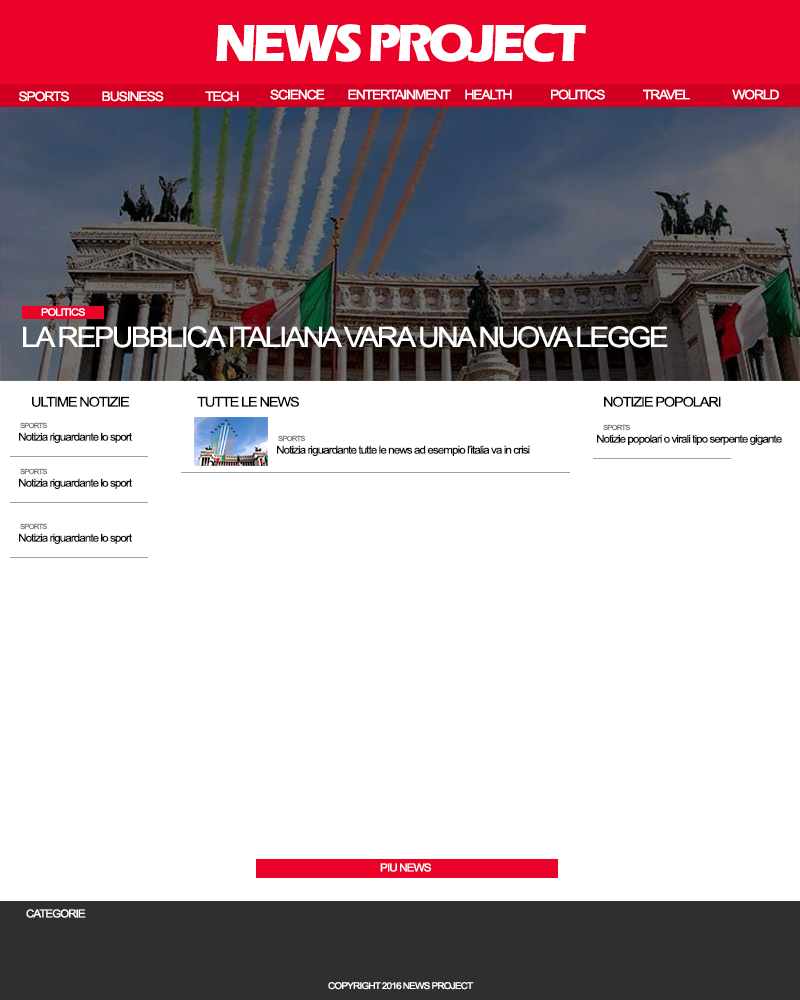
<style>
.page{position:relative;width:800px;height:1000px;background:#ffffff}
.page>*{position:absolute;margin:0}
.t1{font:53.7px "ErasITC-Bold";letter-spacing:-0.08em;color:#ffffff;scale:0.96 1}
.t2{font:13px "ArialMT";letter-spacing:-0.08em;color:#ffffff;scale:1.07 1}
.t3{font:10.1px "ArialMT";letter-spacing:-0.08em;color:#ffffff;scale:1.1 1}
.t4{font:28.2px "ArialMT";letter-spacing:-0.08em;color:#ffffff;scale:1.06 1}
.t5{font:13.5px "ArialMT";letter-spacing:-0.08em;color:#000000;scale:1.08 1}
.t6{font:7.1px "ArialMT";letter-spacing:-0.08em;color:#757575;scale:1.04 1}
.t7{font:11px "ArialMT";letter-spacing:-0.08em;color:#0b0b0b;scale:1.06 1}
.t8{font:11px "ArialMT";letter-spacing:-0.08em;color:#ffffff;scale:1.07 1}
.t9{font:11px "ArialMT";letter-spacing:-0.08em;color:#ffffff;scale:1.05 1}
.t10{font:9.3px "ArialMT";letter-spacing:-0.08em;color:#ffffff;scale:1.07 1}
</style>
<div class="page">
<p class="t1" style="left:216px;top:24px;width:370px;height:38px">NEWS PROJECT</p>
<p class="t2" style="left:270px;top:89px;width:55px;height:11px">SCIENCE</p>
<p class="t2" style="left:348px;top:89px;width:103px;height:11px">ENTERTAINMENT</p>
<p class="t2" style="left:465px;top:89px;width:47px;height:11px">HEALTH</p>
<p class="t2" style="left:551px;top:89px;width:54px;height:11px">POLITICS</p>
<p class="t2" style="left:643px;top:89px;width:47px;height:11px">TRAVEL</p>
<p class="t2" style="left:732px;top:89px;width:47px;height:11px">WORLD</p>
<p class="t2" style="left:19px;top:91px;width:50px;height:11px">SPORTS</p>
<p class="t2" style="left:102px;top:91px;width:62px;height:11px">BUSINESS</p>
<p class="t2" style="left:205px;top:91px;width:34px;height:11px">TECH</p>
<p class="t3" style="left:41px;top:308px;width:44px;height:8px">POLITICS</p>
<p class="t4" style="left:23px;top:326px;width:645px;height:22px">LA REPUBBLICA ITALIANA VARA UNA NUOVA LEGGE</p>
<p class="t5" style="left:32px;top:396px;width:98px;height:11px">ULTIME NOTIZIE</p>
<p class="t5" style="left:197px;top:396px;width:102px;height:11px">TUTTE LE NEWS</p>
<p class="t5" style="left:604px;top:396px;width:117px;height:11px">NOTIZIE POPOLARI</p>
<p class="t6" style="left:20px;top:422px;width:27px;height:7px">SPORTS</p>
<p class="t6" style="left:603px;top:424px;width:27px;height:7px">SPORTS</p>
<p class="t7" style="left:19px;top:432px;width:114px;height:11px">Notizia riguardante lo sport</p>
<p class="t6" style="left:278px;top:435px;width:27px;height:7px">SPORTS</p>
<p class="t7" style="left:597px;top:434px;width:185px;height:11px">Notizie popolari o virali tipo serpente gigante</p>
<p class="t7" style="left:277px;top:445px;width:253px;height:11px">Notizia riguardante tutte le news ad esempio l’italia va in crisi</p>
<p class="t6" style="left:20px;top:468px;width:27px;height:7px">SPORTS</p>
<p class="t7" style="left:19px;top:478px;width:114px;height:11px">Notizia riguardante lo sport</p>
<p class="t7" style="left:19px;top:533px;width:114px;height:11px">Notizia riguardante lo sport</p>
<p class="t6" style="left:20px;top:523px;width:27px;height:7px">SPORTS</p>
<p class="t8" style="left:380px;top:863px;width:51px;height:9px">PIU NEWS</p>
<p class="t9" style="left:26px;top:909px;width:60px;height:9px">CATEGORIE</p>
<p class="t10" style="left:328px;top:982px;width:146px;height:8px">COPYRIGHT 2016 NEWS PROJECT</p>
</div>
